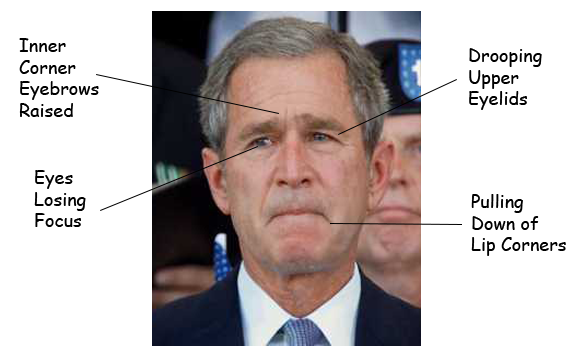
<style>
.page{position:relative;width:576px;height:360px;background:#ffffff}
.page>*{position:absolute;margin:0}
.t1{font:18px "ComicSansMS";color:#000000}
</style>
<div class="page">
<p class="t1" style="left:19px;top:38px;width:80px;height:79px">Inner<br>Corner<br>Eyebrows<br>Raised</p>
<p class="t1" style="left:469px;top:48px;width:73px;height:62px">Drooping<br>Upper<br>Eyelids</p>
<p class="t1" style="left:34px;top:170px;width:52px;height:57px">Eyes<br>Losing<br>Focus</p>
<p class="t1" style="left:471px;top:194px;width:95px;height:62px">Pulling<br>Down of<br>Lip Corners</p>
</div>
